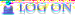
<style>
.page{position:relative;width:75px;height:15px;background:#ffffff}
.page>*{position:absolute;margin:0}
.t1{font:12px "CharlemagneStd-Bold"}
</style>
<div class="page">
<p class="t1" style="left:18px;top:2px;width:54px;height:12px">Log on</p>
</div>
